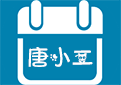
<style>
.page{position:relative;width:121px;height:85px;background:#0181af}
.page>*{position:absolute;margin:0}
.t1{font:21.7px "STHeitiTC-Medium";color:#fffefe}
</style>
<div class="page">
<p class="t1" style="left:28px;top:47px;width:65px;height:20px">唐小二</p>
</div>
